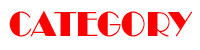
<style>
.page{position:relative;width:200px;height:50px;background:#ffffff}
.page>*{position:absolute;margin:0}
.t1{font:36px "Broadway";color:#ff0000;scale:0.89 1}
</style>
<div class="page">
<p class="t1" style="left:9px;top:10px;width:183px;height:27px">CATEGORY</p>
</div>
